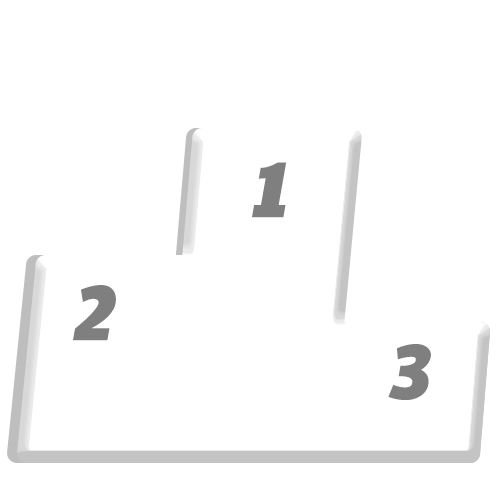
<style>
.page{position:relative;width:500px;height:500px;background:#ffffff}
.page>*{position:absolute;margin:0}
.t1{font:81.3px "PaytoneOne";color:#7f7f7f;font-style:italic}
</style>
<div class="page">
<p class="t1" style="left:252px;top:162px;width:35px;height:56px">1</p>
<p class="t1" style="left:73px;top:285px;width:43px;height:56px">2</p>
<p class="t1" style="left:388px;top:344px;width:43px;height:56px">3</p>
</div>
